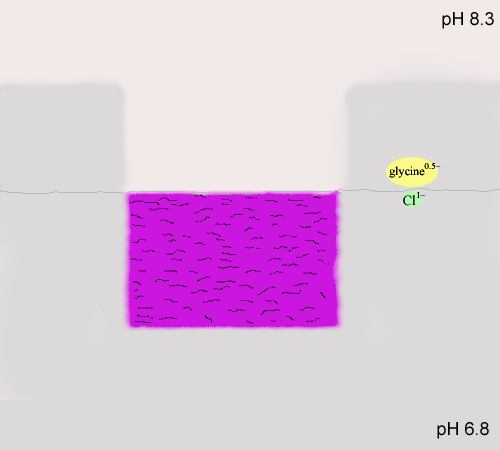
<style>
.page{position:relative;width:500px;height:450px;background:#dbd9d9}
.page>*{position:absolute;margin:0}
.t1{font:18px "ArialMT";color:#000000}
.t2{font:12px "TimesNewRomanPSMT";color:#000000}
.t3{font:9px "TimesNewRomanPSMT";color:#000000}
.t4{font:14px "TimesNewRomanPSMT";color:#000000}
</style>
<div class="page">
<p class="t1" style="left:441px;top:12px;width:54px;height:24px">pH 8.3</p>
<p class="t2" style="left:389px;top:167px;width:36px;height:15px">glycine</p>
<p class="t3" style="left:425px;top:163px;width:15px;height:12px">0.5–</p>
<p class="t4" style="left:403px;top:196px;width:16px;height:18px">Cl</p>
<p class="t3" style="left:416px;top:192px;width:9px;height:12px">1–</p>
<p class="t1" style="left:436px;top:422px;width:54px;height:24px">pH 6.8</p>
</div>
